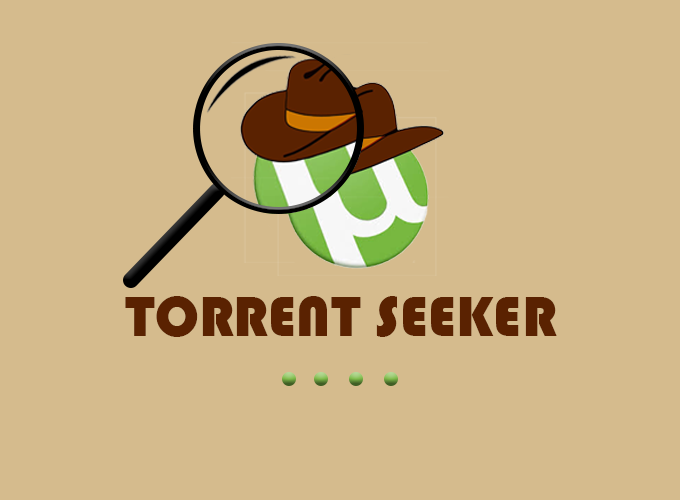
<style>
.page{position:relative;width:680px;height:500px;background:#d5bb8d}
.page>*{position:absolute;margin:0}
.t1{font:58.3px "Bauhaus93";color:#5a2201}
</style>
<div class="page">
<p class="t1" style="left:125px;top:296px;width:432px;height:41px">TORRENT SEEKER</p>
</div>
